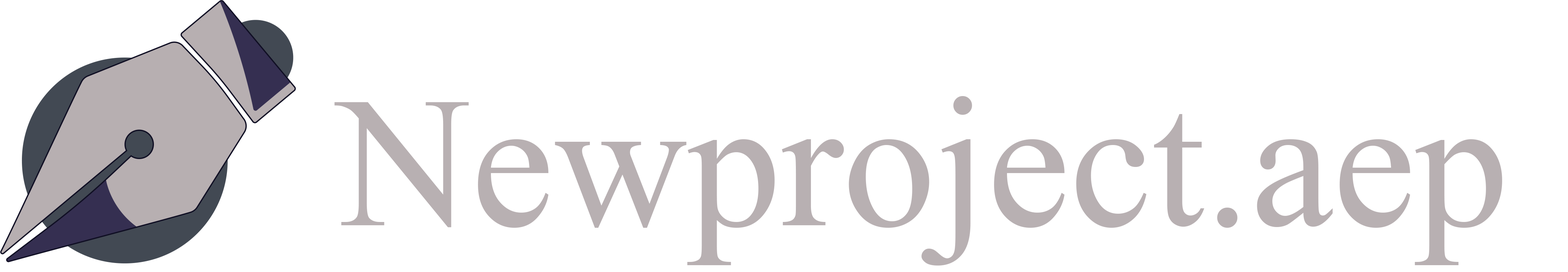
<style>
.page{position:relative;width:1568px;height:272px;background:#ffffff}
.page>*{position:absolute;margin:0}
.t1{font:185.9px "Poppins-Medium";color:#b8b0b2}
</style>
<div class="page">
<p class="t1" style="left:334px;top:96px;width:1168px;height:169px">Newproject.aep</p>
</div>
